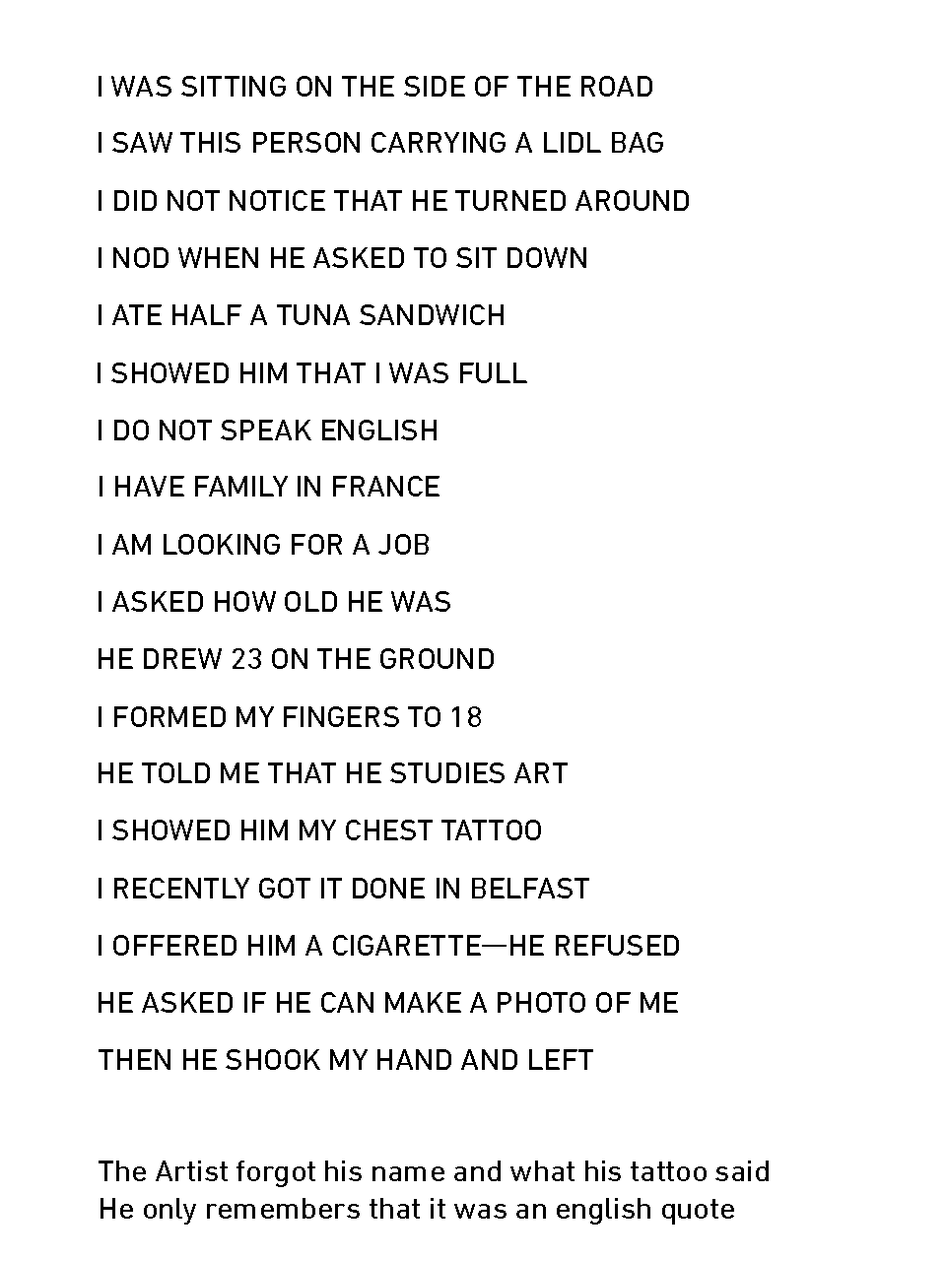
<style>
.page{position:relative;width:946px;height:1261px;background:#ffffff}
.page>*{position:absolute;margin:0}
.t1{font:30.5px "DINNextLTPro-Regular";color:#000000;text-transform:uppercase}
.t2{font:38.2px "DINNextLTPro-Regular";color:#000000;text-transform:uppercase;scale:0.81 1}
.t3{font:30.5px "DINNextLTPro-Regular";color:#000000}
</style>
<div class="page">
<p class="t1" style="left:99px;top:76px;width:553px;height:21px">I was sitting on the Side of the road</p>
<p class="t1" style="left:99px;top:132px;width:564px;height:21px">I saw this person carrying a lidl bag</p>
<p class="t1" style="left:99px;top:190px;width:590px;height:21px">I did not notice that he turned around</p>
<p class="t1" style="left:99px;top:247px;width:487px;height:21px">I nod when he asked to sit down</p>
<p class="t1" style="left:99px;top:304px;width:404px;height:21px">I ate half a tuna sandwich</p>
<p class="t1" style="left:98px;top:363px;width:429px;height:20px">I showed him that i was full</p>
<p class="t1" style="left:99px;top:420px;width:337px;height:20px">I do not speak english</p>
<p class="t1" style="left:99px;top:476px;width:340px;height:20px">I have family in France</p>
<p class="t1" style="left:99px;top:534px;width:330px;height:21px">I am looking for a job</p>
<p class="t1" style="left:99px;top:591px;width:351px;height:21px">I asked how old he was</p>
<p class="t1" style="left:99px;top:648px;width:395px;height:21px">He drew 23 on the ground</p>
<p class="t1" style="left:99px;top:706px;width:382px;height:21px">I formed my fingers to 18</p>
<p class="t1" style="left:99px;top:762px;width:468px;height:21px">He told me that he studies art</p>
<p class="t1" style="left:99px;top:820px;width:442px;height:20px">I showed him my chest tattoo</p>
<p class="t1" style="left:99px;top:878px;width:490px;height:20px">I recently got it done in Belfast</p>
<p class="t1" style="left:99px;top:935px;width:580px;height:21px">I offered him a cigarette<span class="t2">—</span>He refused</p>
<p class="t1" style="left:99px;top:992px;width:579px;height:21px">He asked if he can make a photo of me</p>
<p class="t1" style="left:99px;top:1049px;width:494px;height:21px">Then he shook my hand and left</p>
<p class="t3" style="left:99px;top:1160px;width:669px;height:64px">The Artist forgot his name and what his tattoo said <br>He only remembers that it was an english quote</p>
</div>
